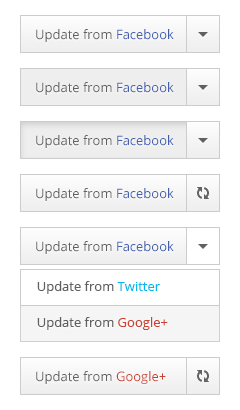
<style>
.page{position:relative;width:240px;height:410px;background:#ffffff}
.page>*{position:absolute;margin:0}
.t1{font:13px "OpenSans";color:#606060}
.t2{font:13px "OpenSans";color:#425fad}
.t3{font:13px "OpenSans";color:#04b8eb}
.t4{font:13px "OpenSans";color:#c94232}
</style>
<div class="page">
<p class="t1" style="left:36px;top:29px;width:138px;height:13px">Update from <span class="t2">Facebook</span></p>
<p class="t1" style="left:36px;top:82px;width:138px;height:13px">Update from <span class="t2">Facebook</span></p>
<p class="t1" style="left:36px;top:135px;width:138px;height:13px">Update from <span class="t2">Facebook</span></p>
<p class="t1" style="left:36px;top:188px;width:138px;height:13px">Update from <span class="t2">Facebook</span></p>
<p class="t1" style="left:36px;top:241px;width:138px;height:13px">Update from <span class="t2">Facebook</span></p>
<p class="t1" style="left:37px;top:281px;width:123px;height:13px">Update from <span class="t3">Twitter</span></p>
<p class="t1" style="left:37px;top:317px;width:131px;height:13px">Update from <span class="t4">Google+</span></p>
<p class="t1" style="left:36px;top:371px;width:130px;height:13px">Update from <span class="t4">Google+</span></p>
</div>
